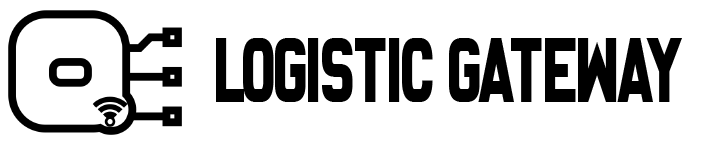
<style>
.page{position:relative;width:704px;height:145px;background:#ffffff}
.page>*{position:absolute;margin:0}
.t1{font:87.4px "Achtung!Polizei";color:#000000;scale:0.59 1}
</style>
<div class="page">
<p class="t1" style="left:216px;top:38px;width:466px;height:64px">LOGISTIC GaTeWAY</p>
</div>
